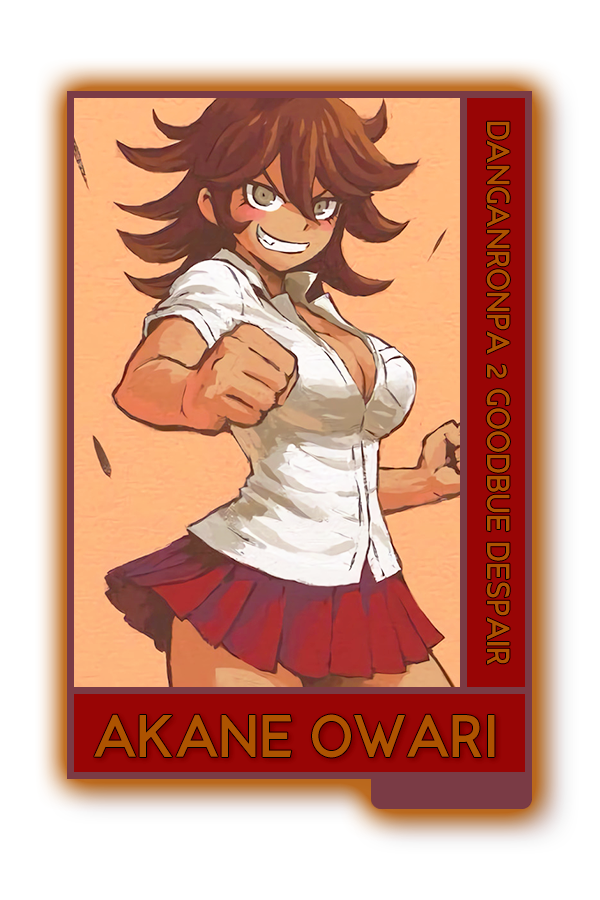
<style>
.page{position:relative;width:600px;height:900px;background:#ffffff}
.page>*{position:absolute;margin:0}
.t1{font:30.1px "Ancillary-Bold";color:#ad5300}
.t2{font:56px "Ancillary-Bold";color:#ad5300}
</style>
<div class="page">
<p class="t1" style="left:486px;top:121px;width:24px;height:544px;rotate:90deg">DANGANRONPA 2 GOODBUE DESPAIR</p>
<p class="t2" style="left:94px;top:714px;width:401px;height:44px">AKANE OWARI</p>
</div>
